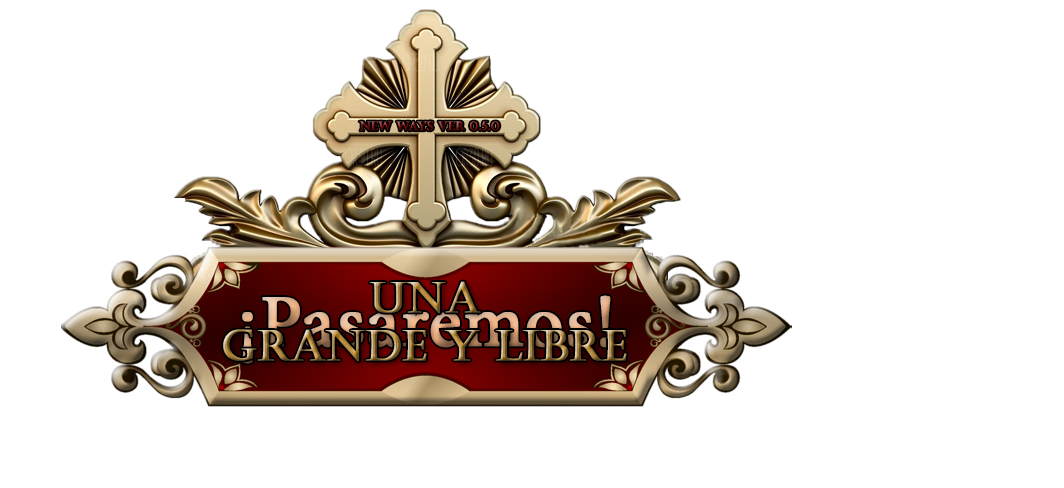
<style>
.page{position:relative;width:1064px;height:488px;background:#ffffff}
.page>*{position:absolute;margin:0}
.t1{font:12px "Castellar";font-weight:bold}
.t2{font:42px/24px "Castellar";font-weight:bold}
.t3{font:90px "AdobeThai-Regular";font-weight:bold}
</style>
<div class="page">
<p class="t1" style="left:359px;top:121px;width:141px;height:10px">NEW WAYS VER 0.5.0</p>
<p class="t2" style="left:223px;top:281px;width:404px;height:81px;text-align:center">Una<br><br>Grande y Libre</p>
<p class="t3" style="left:242px;top:295px;width:369px;height:69px">¡Pasaremos!</p>
</div>
